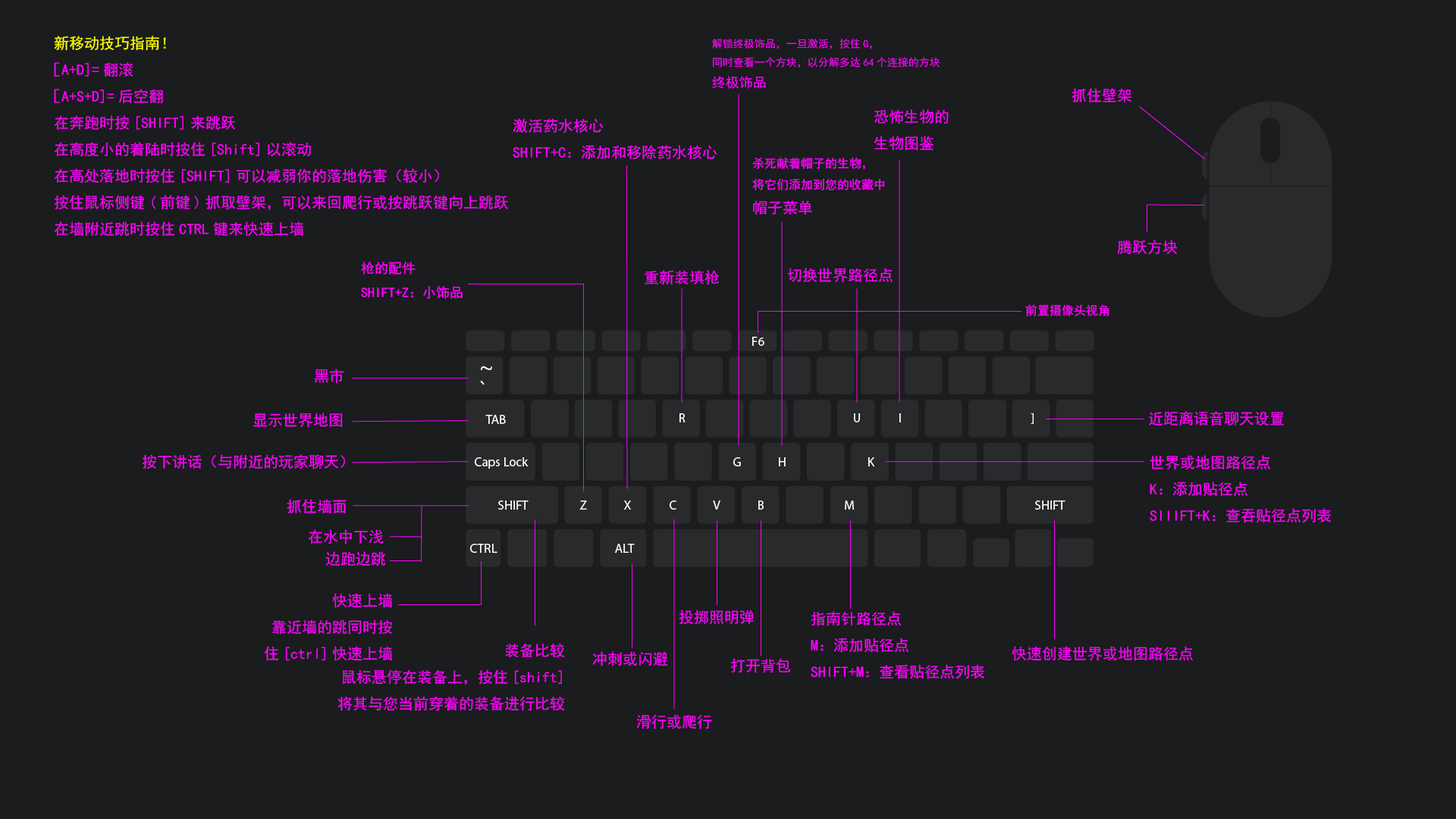
<style>
.page{position:relative;width:1456px;height:819px;background:#1a1c1e}
.page>*{position:absolute;margin:0}
.t1{font:15.2px "SimHei";color:#ff00ff}
.t2{font:15.2px "SimHei";color:#ffff00}
.t3{font:10.6px "SimHei";color:#ff00ff}
.t4{font:13.6px "SimHei";color:#ff00ff}
.t5{font:12.1px "SimHei";color:#ff00ff}
</style>
<div class="page">
<p class="t1" style="left:54px;top:36px;width:454px;height:201px"><span class="t2">新移动技巧指南！<br></span>［A+D]=翻滚<br>［A+S+D]=后空翻<br>在奔跑时按[SHIFT]来跳跃<br>在高度小的着陆时按住[Shift]以滚动<br>在高处落地时按住[SHIFT]可以减弱你的落地伤害（较小）<br>按住鼠标侧键(前键)抓取壁架，可以来回爬行或按跳跃键向上跳跃<br>在墙附近跳时按住CTRL键来快速上墙</p>
<p class="t3" style="left:712px;top:39px;width:228px;height:50px">解锁终极饰品，一旦激活，按住G，<br>同时查看一个方块，以分解多达64个连接的方块<br><span class="t4">终极饰品</span></p>
<p class="t1" style="left:1072px;top:88px;width:59px;height:15px">抓住壁架</p>
<p class="t1" style="left:874px;top:109px;width:75px;height:42px">恐怖生物的<br>生物图鉴</p>
<p class="t1" style="left:513px;top:118px;width:204px;height:42px">激活药水核心<br>SHIFT+C：添加和移除药水核心</p>
<p class="t5" style="left:752px;top:157px;width:133px;height:58px">杀死献着帽子的生物，<br>将它们添加到您的收藏中<br><span class="t1">帽子菜单</span></p>
<p class="t1" style="left:1117px;top:240px;width:61px;height:15px">腾跃方块</p>
<p class="t4" style="left:361px;top:262px;width:102px;height:37px">枪的配件<br>SHIFT+Z：小饰品</p>
<p class="t1" style="left:645px;top:270px;width:74px;height:15px">重新装填枪</p>
<p class="t1" style="left:788px;top:268px;width:105px;height:15px">切换世界路径点</p>
<p class="t5" style="left:1025px;top:304px;width:84px;height:12px">前置摄像头视角</p>
<p class="t1" style="left:314px;top:369px;width:30px;height:15px">黑市</p>
<p class="t1" style="left:253px;top:413px;width:90px;height:15px">显示世界地图</p>
<p class="t1" style="left:1148px;top:411px;width:136px;height:15px">近距离语音聊天设置</p>
<p class="t1" style="left:142px;top:454px;width:203px;height:15px">按下讲话（与附近的玩家聊天）</p>
<p class="t1" style="left:1150px;top:455px;width:182px;height:68px">世界或地图路径点<br>K：添加贴径点<br>SIIIFT+K：查吞贴径点列表</p>
<p class="t1" style="left:287px;top:499px;width:60px;height:15px">抓住墙面</p>
<p class="t1" style="left:308px;top:529px;width:76px;height:15px">在水中下浅</p>
<p class="t1" style="left:325px;top:551px;width:61px;height:15px">边跑边跳</p>
<p class="t1" style="left:264px;top:593px;width:129px;height:68px;text-align:right">快速上墙<br>靠近墙的跳同时按<br>住[ctrl]快速上墙</p>
<p class="t1" style="left:679px;top:610px;width:75px;height:15px">投掷照明弹</p>
<p class="t1" style="left:811px;top:611px;width:174px;height:68px">指南针路径点<br>M：添加贴径点<br>SHIFT+M：查看贴径点列表</p>
<p class="t1" style="left:337px;top:643px;width:228px;height:68px;text-align:right">装备比较<br>鼠标悬停在装备上，按住[shift]<br>将其与您当前穿着的装备进行比较</p>
<p class="t1" style="left:592px;top:651px;width:76px;height:15px">冲刺或闪避</p>
<p class="t1" style="left:1012px;top:646px;width:181px;height:15px">快速创建世界或地图路径点</p>
<p class="t1" style="left:731px;top:658px;width:60px;height:15px">打开背包</p>
<p class="t1" style="left:636px;top:714px;width:76px;height:16px">滑行或爬行</p>
</div>
